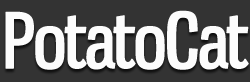
<style>
.page{position:relative;width:250px;height:82px;background:#333333}
.page>*{position:absolute;margin:0}
.t1{font:75px "GnuolaneFree";letter-spacing:-0.04em;color:#fcfcfc;font-weight:bold}
</style>
<div class="page">
<p class="t1" style="left:5px;top:10px;width:244px;height:60px">PotatoCat</p>
</div>
